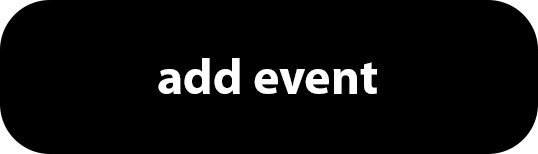
<style>
.page{position:relative;width:538px;height:154px;background:#000000}
.page>*{position:absolute;margin:0}
.t1{font:49.8px "MyriadPro-Bold";color:#ffffff}
</style>
<div class="page">
<p class="t1" style="left:158px;top:58px;width:219px;height:36px">add event</p>
</div>
